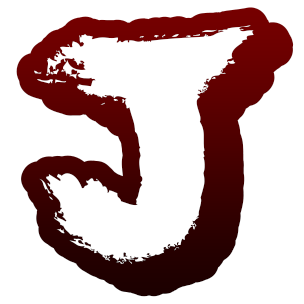
<style>
.page{position:relative;width:304px;height:304px;background:#ffffff}
.page>*{position:absolute;margin:0}
.t1{font:352.9px "ThisNight"}
</style>
<div class="page">
<p class="t1" style="left:16px;top:7px;width:278px;height:290px">J</p>
</div>
